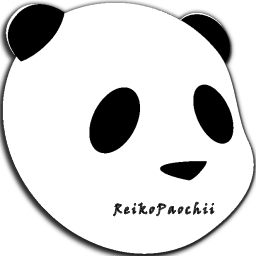
<style>
.page{position:relative;width:256px;height:256px;background:#ffffff}
.page>*{position:absolute;margin:0}
.t1{font:13.2px "VinerHandITC";letter-spacing:0.2em;color:#000000;scale:0.91 1}
</style>
<div class="page">
<p class="t1" style="left:113px;top:202px;width:101px;height:14px">ReikoPaochii</p>
</div>
